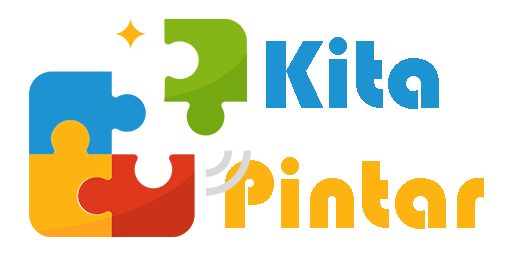
<style>
.page{position:relative;width:512px;height:256px;background:#ffffff}
.page>*{position:absolute;margin:0}
.t1{font:100px "Bauhaus93";color:#fdb312}
.t2{font:100px "Bauhaus93";color:#1e93d2}
</style>
<div class="page">
<p class="t1" style="left:225px;top:37px;width:259px;height:192px;text-align:center"><span class="t2">Kita<br></span>Pintar</p>
</div>
